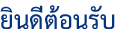
<style>
.page{position:relative;width:125px;height:29px;background:#ffffff}
.page>*{position:absolute;margin:0}
.t1{font:36px "THSarabunPSK-Bold";color:#06337d}
</style>
<div class="page">
<p class="t1" style="left:0px;top:5px;width:115px;height:24px">ยินดีต้อนรับ</p>
</div>
